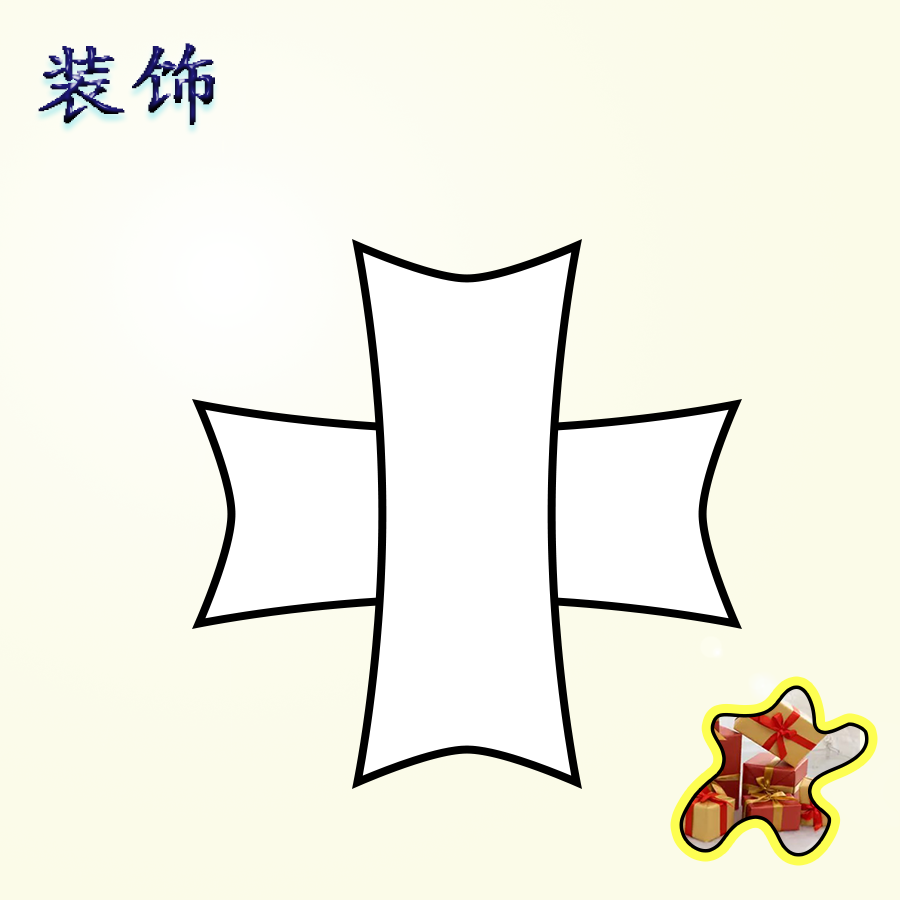
<style>
.page{position:relative;width:900px;height:900px}
.page>*{position:absolute;margin:0}
.t1{font:87px "¿¬Ìå";font-weight:bold;scale:1.09 1}
</style>
<div class="page">
<p class="t1" style="left:38px;top:43px;width:177px;height:82px">装饰</p>
</div>
